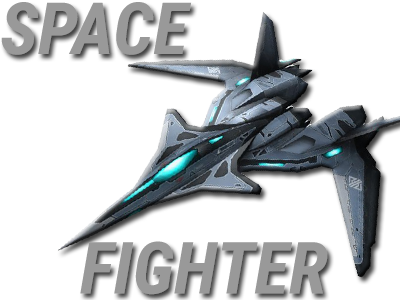
<style>
.page{position:relative;width:400px;height:300px;background:#ffffff}
.page>*{position:absolute;margin:0}
.t1{font:72px "RobotoCondensed-BoldItalic";color:#999999}
</style>
<div class="page">
<p class="t1" style="left:1px;top:2px;width:191px;height:53px">SPACE</p>
<p class="t1" style="left:80px;top:241px;width:248px;height:54px">FIGHTER</p>
</div>
